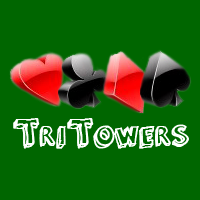
<style>
.page{position:relative;width:200px;height:200px;background:#006600}
.page>*{position:absolute;margin:0}
.t1{font:36px "3dumb";color:#ffffff;font-variant:small-caps;font-weight:bold}
</style>
<div class="page">
<p class="t1" style="left:13px;top:118px;width:176px;height:31px">TriTowers</p>
</div>
